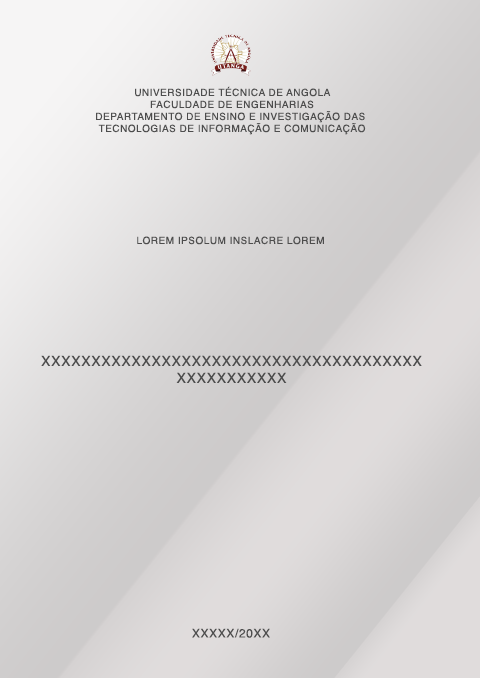
<style>
.page{position:relative;width:480px;height:679px}
.page>*{position:absolute;margin:0}
.t1{font:10px "Helvetica";letter-spacing:0.05em;color:#4d4d4d}
.t2{font:14px "Helvetica";letter-spacing:0.05em;color:#4d4d4d}
.t3{font:12px "Helvetica";letter-spacing:0.05em;color:#4d4d4d}
</style>
<div class="page">
<p class="t1" style="left:96px;top:86px;width:270px;height:49px;text-align:center">UNIVERSIDADE TÉCNICA DE ANGOLA<br>FACULDADE DE ENGENHARIAS<br>DEPARTAMENTO DE ENSINO E INVESTIGAÇÃO DAS <br>TECNOLOGIAS DE INFORMAÇÃO E COMUNICAÇÃO</p>
<p class="t1" style="left:137px;top:236px;width:187px;height:9px">LOREM IPSOLUM INSLACRE LOREM</p>
<p class="t2" style="left:41px;top:355px;width:381px;height:28px;text-align:center">XXXXXXXXXXXXXXXXXXXXXXXXXXXXXXXXXXXXXX<br>XXXXXXXXXXX</p>
<p class="t3" style="left:192px;top:628px;width:78px;height:10px">XXXXX/20XX</p>
</div>
